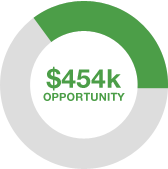
<style>
.page{position:relative;width:168px;height:169px;background:#ffffff}
.page>*{position:absolute;margin:0}
.t1{font:11px "HelveticaNeue-Bold";letter-spacing:0.015em;color:#4c9e48}
.t2{font:26px "HelveticaNeue-Bold";letter-spacing:0.015em;color:#4c9e48}
</style>
<div class="page">
<p class="t1" style="left:43px;top:66px;width:82px;height:35px;text-align:center"><span class="t2">$454k<br></span>OPPORTUNITY</p>
</div>
